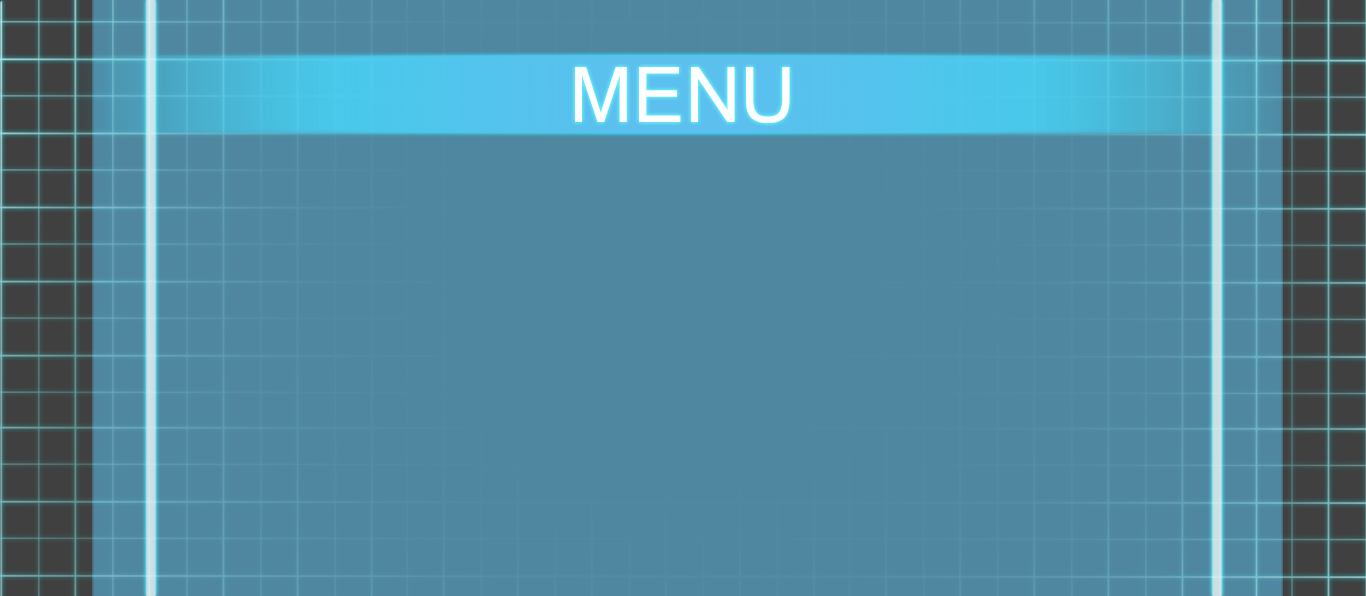
<style>
.page{position:relative;width:1366px;height:596px;background:#4f86a0}
.page>*{position:absolute;margin:0}
.t1{font:85.3px "Raavi";color:#fffefe}
</style>
<div class="page">
<p class="t1" style="left:575px;top:67px;width:215px;height:56px">MENU</p>
</div>
